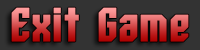
<style>
.page{position:relative;width:200px;height:50px;background:#333333}
.page>*{position:absolute;margin:0}
.t1{font:47.9px "Whitestone-Bold"}
</style>
<div class="page">
<p class="t1" style="left:11px;top:7px;width:178px;height:35px">Exit Game</p>
</div>
